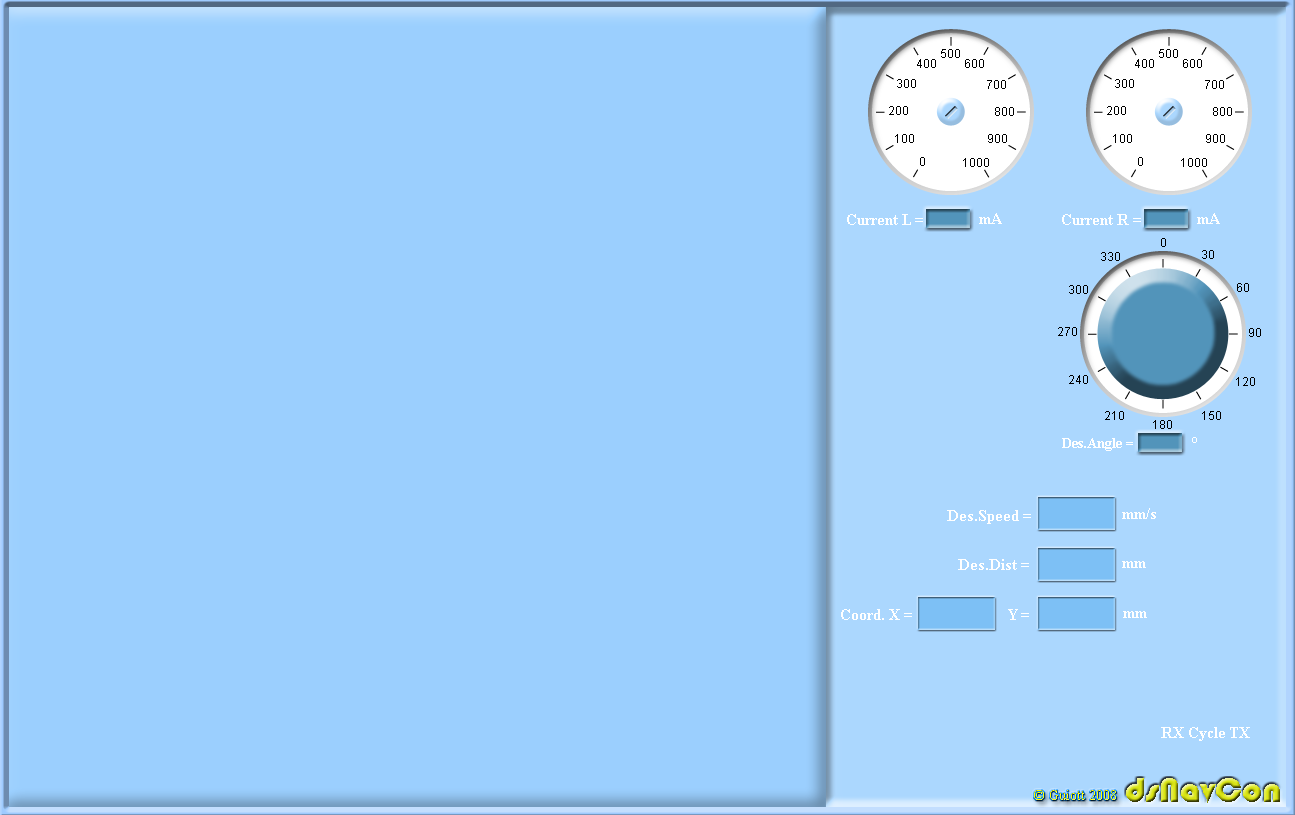
<style>
.page{position:relative;width:1295px;height:815px;background:#9bcffe}
.page>*{position:absolute;margin:0}
.t1{font:12px "ArialMT";color:#000000}
.t2{font:16px "TimesNewRomanPS-BoldMT";color:#ffffff}
.t3{font:14px "TimesNewRomanPS-BoldMT";color:#ffffff}
.t4{font:36px "Bauhaus93"}
.t5{font:14px "TimesNewRomanPSMT"}
</style>
<div class="page">
<p class="t1" style="left:941px;top:49px;width:19px;height:9px">500</p>
<p class="t1" style="left:1159px;top:49px;width:19px;height:9px">500</p>
<p class="t1" style="left:917px;top:59px;width:19px;height:9px">400</p>
<p class="t1" style="left:965px;top:59px;width:19px;height:9px">600</p>
<p class="t1" style="left:1135px;top:59px;width:19px;height:9px">400</p>
<p class="t1" style="left:1183px;top:59px;width:19px;height:9px">600</p>
<p class="t1" style="left:897px;top:79px;width:19px;height:9px">300</p>
<p class="t1" style="left:987px;top:80px;width:19px;height:9px">700</p>
<p class="t1" style="left:1115px;top:79px;width:19px;height:9px">300</p>
<p class="t1" style="left:1205px;top:80px;width:19px;height:9px">700</p>
<p class="t1" style="left:889px;top:106px;width:19px;height:9px">200</p>
<p class="t1" style="left:995px;top:107px;width:19px;height:9px">800</p>
<p class="t1" style="left:1107px;top:106px;width:19px;height:9px">200</p>
<p class="t1" style="left:1213px;top:107px;width:19px;height:9px">800</p>
<p class="t1" style="left:895px;top:134px;width:19px;height:9px">100</p>
<p class="t1" style="left:988px;top:134px;width:19px;height:9px">900</p>
<p class="t1" style="left:1113px;top:134px;width:19px;height:9px">100</p>
<p class="t1" style="left:1206px;top:134px;width:19px;height:9px">900</p>
<p class="t1" style="left:920px;top:157px;width:5px;height:9px">0</p>
<p class="t1" style="left:963px;top:158px;width:26px;height:9px">1000</p>
<p class="t1" style="left:1138px;top:157px;width:5px;height:9px">0</p>
<p class="t1" style="left:1181px;top:158px;width:26px;height:9px">1000</p>
<p class="t2" style="left:847px;top:214px;width:76px;height:11px">Current L =</p>
<p class="t2" style="left:979px;top:213px;width:23px;height:11px">mA</p>
<p class="t2" style="left:1062px;top:214px;width:79px;height:11px">Current R =</p>
<p class="t2" style="left:1197px;top:213px;width:23px;height:11px">mA</p>
<p class="t1" style="left:1161px;top:238px;width:5px;height:9px">0</p>
<p class="t1" style="left:1101px;top:252px;width:19px;height:9px">330</p>
<p class="t1" style="left:1202px;top:250px;width:12px;height:9px">30</p>
<p class="t1" style="left:1069px;top:285px;width:19px;height:9px">300</p>
<p class="t1" style="left:1237px;top:283px;width:12px;height:9px">60</p>
<p class="t1" style="left:1058px;top:327px;width:19px;height:9px">270</p>
<p class="t1" style="left:1249px;top:328px;width:12px;height:9px">90</p>
<p class="t1" style="left:1069px;top:375px;width:19px;height:9px">240</p>
<p class="t1" style="left:1236px;top:377px;width:19px;height:9px">120</p>
<p class="t1" style="left:1105px;top:411px;width:19px;height:9px">210</p>
<p class="t1" style="left:1202px;top:411px;width:19px;height:9px">150</p>
<p class="t1" style="left:1153px;top:420px;width:19px;height:9px">180</p>
<p class="t3" style="left:1062px;top:438px;width:71px;height:13px">Des.Angle =</p>
<p class="t2" style="left:1192px;top:437px;width:5px;height:6px">°</p>
<p class="t2" style="left:947px;top:510px;width:84px;height:14px">Des.Speed =</p>
<p class="t2" style="left:1122px;top:508px;width:34px;height:11px">mm/s</p>
<p class="t2" style="left:958px;top:559px;width:71px;height:11px">Des.Dist =</p>
<p class="t2" style="left:1122px;top:561px;width:24px;height:7px">mm</p>
<p class="t2" style="left:841px;top:609px;width:71px;height:11px">Coord. X =</p>
<p class="t2" style="left:1008px;top:609px;width:21px;height:11px">Y =</p>
<p class="t2" style="left:1123px;top:611px;width:24px;height:7px">mm</p>
<p class="t2" style="left:1161px;top:727px;width:23px;height:11px">RX</p>
<p class="t2" style="left:1189px;top:727px;width:36px;height:14px">Cycle</p>
<p class="t2" style="left:1230px;top:727px;width:20px;height:11px">TX</p>
<p class="t4" style="left:1126px;top:778px;width:154px;height:25px">dsNavCon</p>
<p class="t5" style="left:1034px;top:790px;width:82px;height:10px">© Guiott 2008</p>
</div>
